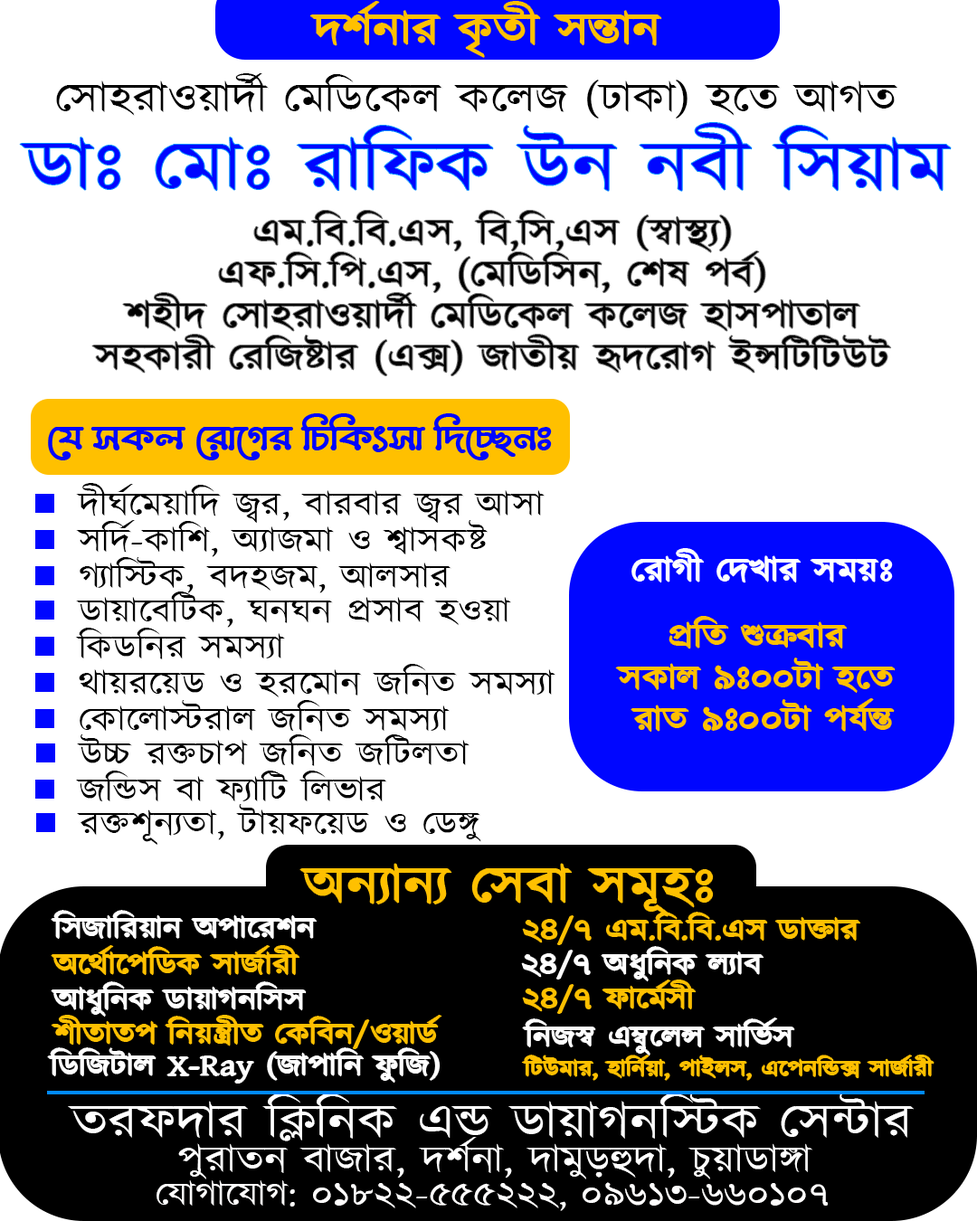
<style>
.page{position:relative;width:977px;height:1221px;background:#ffffff}
.page>*{position:absolute;margin:0}
.t1{font:45.2px "Kalpurush";color:#ffc000;scale:1.16 1}
.t2{font:41.4px "Kalpurush";color:#000000;scale:1.16 1}
.t3{font:71.6px "Kalpurush";color:#0006ff;scale:1.16 1}
.t4{font:37.7px/41.4px "Kalpurush";color:#000000;scale:1.16 1}
.t5{font:37.7px "LiShohidBarkatUnicode";color:#0006ff;scale:1.16 1}
.t6{font:33.9px "Kalpurush";color:#000000;scale:1.16 1}
.t7{font:33.9px "Kalpurush";color:#ffffff;scale:1.16 1}
.t8{font:33.9px/41.4px "Kalpurush";color:#ffc000;scale:1.16 1}
.t9{font:52.8px "Kalpurush";color:#ffc000;scale:1.16 1}
.t10{font:30.1px "Kalpurush";color:#ffffff;scale:1.16 1}
.t11{font:30.1px "Kalpurush";color:#ffc000;scale:1.16 1}
.t12{font:22.6px "Kalpurush";color:#ffc000;scale:1.16 1}
.t13{font:49px "Kalpurush";color:#ffffff;scale:1.16 1}
.t14{font:37.7px "Kalpurush";color:#ffffff;scale:1.16 1}
.t15{font:33.9px "Kalpurush";color:#fffefe;scale:1.16 1}
</style>
<div class="page">
<p class="t1" style="left:310px;top:2px;width:351px;height:55px">দর্শনার কৃতী সন্তান</p>
<p class="t2" style="left:56px;top:73px;width:841px;height:45px">সোহরাওয়ার্দী মেডিকেল কলেজ (ঢাকা) হতে আগত</p>
<p class="t3" style="left:20px;top:123px;width:930px;height:68px">ডাঃ মোঃ রাফিক উন নবী সিয়াম</p>
<p class="t4" style="left:92px;top:211px;width:799px;height:165px;text-align:center">এম.বি.বি.এস, বি,সি,এস (স্বাস্থ্য)<br>এফ.সি.পি.এস, (মেডিসিন, শেষ পর্ব)<br>শহীদ সোহরাওয়ার্দী মেডিকেল কলেজ হাসপাতাল<br>সহকারী রেজিষ্টার (এক্স) জাতীয় হৃদরোগ ইন্সটিটিউট</p>
<p class="t5" style="left:48px;top:413px;width:504px;height:47px">যে সকল রোগের চিকিৎসা দিচ্ছেনঃ</p>
<p class="t6" style="left:76px;top:483px;width:468px;height:40px">দীর্ঘমেয়াদি জ্বর, বারবার জ্বর আসা</p>
<p class="t6" style="left:76px;top:520px;width:411px;height:37px">সর্দি-কাশি, অ্যাজমা ও শ্বাসকষ্ট</p>
<p class="t6" style="left:80px;top:557px;width:371px;height:36px">গ্যাস্টিক, বদহজম, আলসার</p>
<p class="t7" style="left:632px;top:549px;width:260px;height:33px">রোগী দেখার সময়ঃ</p>
<p class="t6" style="left:76px;top:591px;width:435px;height:37px">ডায়াবেটিক, ঘনঘন প্রসাব হওয়া</p>
<p class="t8" style="left:616px;top:617px;width:278px;height:115px;text-align:center">প্রতি শুক্রবার <br>সকাল ৯ঃ০০টা হতে <br>রাত ৯ঃ০০টা পর্যন্ত</p>
<p class="t6" style="left:75px;top:628px;width:210px;height:31px">কিডনির সমস্যা</p>
<p class="t6" style="left:79px;top:664px;width:476px;height:34px">থায়রয়েড ও হরমোন জনিত সমস্যা</p>
<p class="t6" style="left:80px;top:700px;width:369px;height:32px">কোলোস্টরাল জনিত সমস্যা</p>
<p class="t6" style="left:77px;top:734px;width:392px;height:32px">উচ্চ রক্তচাপ জনিত জটিলতা</p>
<p class="t6" style="left:76px;top:771px;width:311px;height:31px">জন্ডিস বা ফ্যাটি লিভার</p>
<p class="t6" style="left:77px;top:804px;width:404px;height:41px">রক্তশূন্যতা, টায়ফয়েড ও ডেঙ্গু</p>
<p class="t9" style="left:300px;top:864px;width:413px;height:52px">অন্যান্য সেবা সমূহঃ</p>
<p class="t10" style="left:52px;top:911px;width:265px;height:28px">সিজারিয়ান অপারেশন</p>
<p class="t11" style="left:523px;top:912px;width:337px;height:32px">২৪/৭ এম.বি.বি.এস ডাক্তার</p>
<p class="t11" style="left:52px;top:946px;width:247px;height:29px">অর্থোপেডিক সার্জারী</p>
<p class="t10" style="left:522px;top:947px;width:241px;height:34px">২৪/৭ অধুনিক ল্যাব</p>
<p class="t10" style="left:52px;top:982px;width:254px;height:34px">আধুনিক ডায়াগনসিস</p>
<p class="t11" style="left:523px;top:980px;width:172px;height:33px">২৪/৭ ফার্মেসী</p>
<p class="t11" style="left:52px;top:1016px;width:389px;height:32px">শীতাতপ নিয়ন্ত্রীত কেবিন/ওয়ার্ড</p>
<p class="t10" style="left:523px;top:1018px;width:271px;height:37px">নিজস্ব এম্বুলেন্স সার্ভিস</p>
<p class="t10" style="left:48px;top:1048px;width:392px;height:35px">ডিজিটাল X-Ray (জাপানি ফুজি)</p>
<p class="t12" style="left:522px;top:1055px;width:411px;height:25px">টিউমার, হার্নিয়া, পাইলস, এপেনন্ডিক্স সার্জারী</p>
<p class="t13" style="left:68px;top:1092px;width:845px;height:49px">তরফদার ক্লিনিক এন্ড ডায়াগনস্টিক সেন্টার</p>
<p class="t14" style="left:178px;top:1137px;width:634px;height:42px">পুরাতন বাজার, দর্শনা, দামুড়হুদা, চুয়াডাঙ্গা</p>
<p class="t15" style="left:156px;top:1180px;width:671px;height:31px">যোগাযোগ: ০১৮২২-৫৫৫২২২, ০৯৬১৩-৬৬০১০৭</p>
</div>
